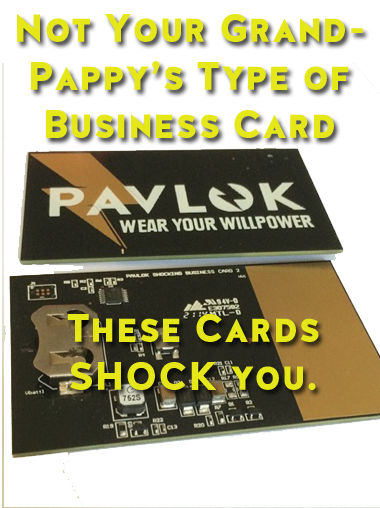
<style>
.page{position:relative;width:380px;height:508px;background:#ffffff}
.page>*{position:absolute;margin:0}
.t1{font:40px "HalisGR-SBlack";color:#e5e719}
</style>
<div class="page">
<p class="t1" style="left:17px;top:14px;width:346px;height:124px;text-align:center">Not Your Grand-<br>Pappy’s Type of<br>Business Card</p>
<p class="t1" style="left:67px;top:314px;width:252px;height:76px;text-align:center">These Cards<br>SHOCK you.</p>
</div>
